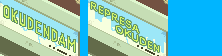
<style>
.page{position:relative;width:222px;height:56px;background:#00b5ff}
.page>*{position:absolute;margin:0}
.t1{font:8.6px "Verdana";color:#d6f76b;scale:1.36 1}
</style>
<div class="page">
<p class="t1" style="left:91px;top:2px;width:48px;height:31px;rotate:27deg">REPRESA</p>
<p class="t1" style="left:116px;top:26px;width:43px;height:26px;rotate:27deg">OKUDEN</p>
</div>
